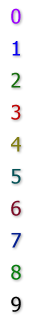
<style>
.page{position:relative;width:32px;height:320px;background:#ffffff}
.page>*{position:absolute;margin:0}
.t1{font:20px/32px "Tahoma";color:#9c00ff}
.t2{font:20px/32px "Tahoma";color:#0701f2}
.t3{font:20px/32px "Tahoma";color:#166d0d}
.t4{font:20px/32px "Tahoma";color:#c00404}
.t5{font:20px/32px "Tahoma";color:#807c10}
.t6{font:20px/32px "Tahoma";color:#045257}
.t7{font:20px/32px "Tahoma";color:#7b0a24}
.t8{font:20px/32px "Tahoma";color:#041f91}
.t9{font:20px/32px "Tahoma";color:#087e0e}
.t10{font:20px/32px "Tahoma";color:#000000}
</style>
<div class="page">
<p class="t1" style="left:11px;top:8px;width:10px;height:304px;text-align:center">0<br><span class="t2">1<br></span><span class="t3">2<br></span><span class="t4">3<br></span><span class="t5">4<br></span><span class="t6">5<br></span><span class="t7">6<br></span><span class="t8">7<br></span><span class="t9">8<br></span><span class="t10">9</span></p>
</div>
